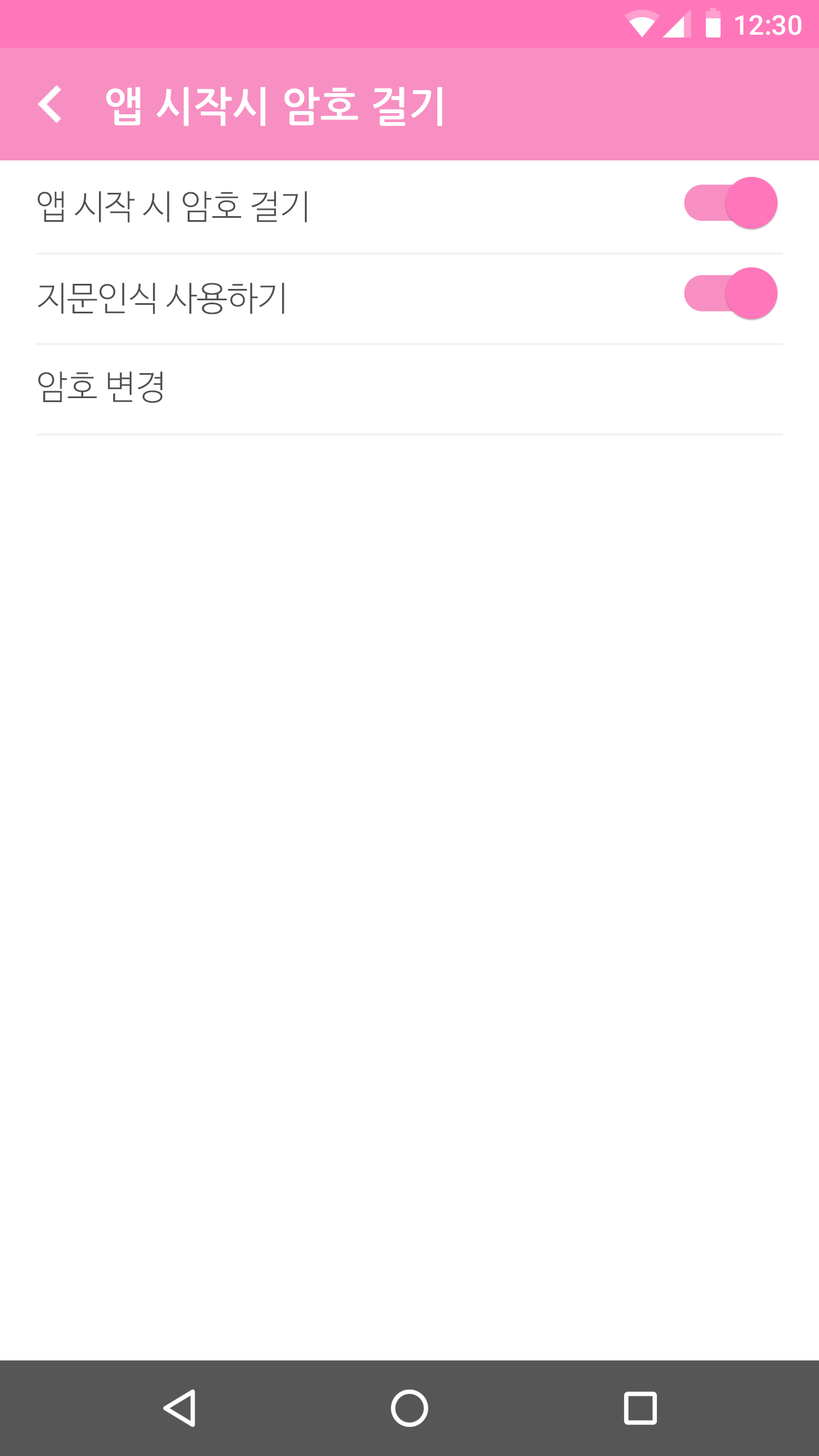
<style>
.page{position:relative;width:819px;height:1456px;background:#ffffff}
.page>*{position:absolute;margin:0}
.t1{font:27.3px "Roboto-Medium";color:#ffffff}
.t2{font:40.9px "NanumGothicBold";color:#ffffff}
.t3{font:34.2px "NanumBarunGothicLight";color:#4f4f4f}
</style>
<div class="page">
<p class="t1" style="left:735px;top:15px;width:66px;height:20px">12:30</p>
<p class="t2" style="left:106px;top:87px;width:336px;height:39px">앱 시작시 암호 걸기</p>
<p class="t3" style="left:38px;top:191px;width:269px;height:31px">앱 시작 시 암호 걸기</p>
<p class="t3" style="left:38px;top:283px;width:246px;height:32px">지문인식 사용하기</p>
<p class="t3" style="left:38px;top:371px;width:125px;height:32px">암호 변경</p>
</div>
